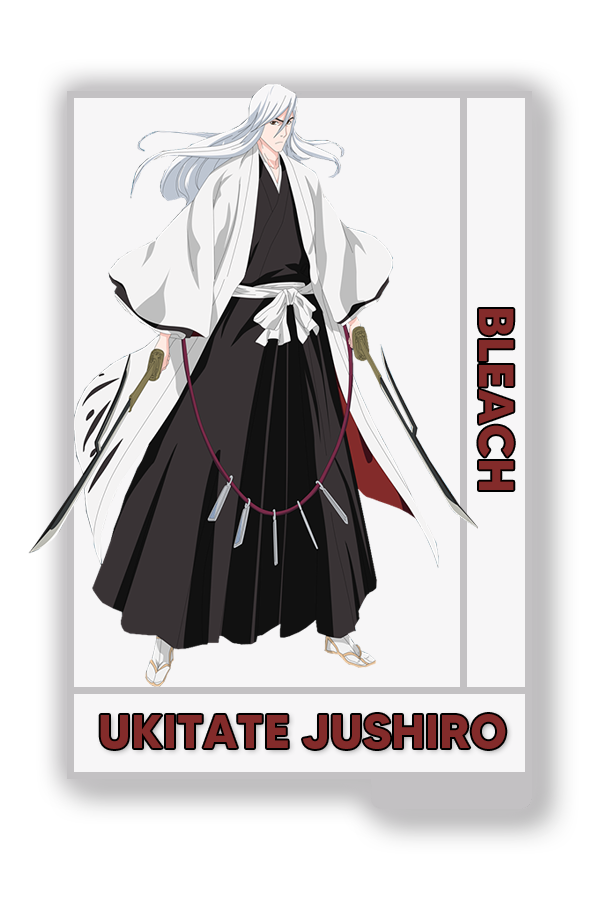
<style>
.page{position:relative;width:600px;height:900px;background:#f7f6f7}
.page>*{position:absolute;margin:0}
.t1{font:48.8px "MADETOMMY-Bold";color:#832b2a}
.t2{font:47.3px "MADETOMMY-Bold";color:#832b2a}
</style>
<div class="page">
<p class="t1" style="left:478px;top:309px;width:36px;height:181px;rotate:90deg">BLEACH</p>
<p class="t2" style="left:100px;top:714px;width:406px;height:35px">UKITATE JUSHIRO</p>
</div>
